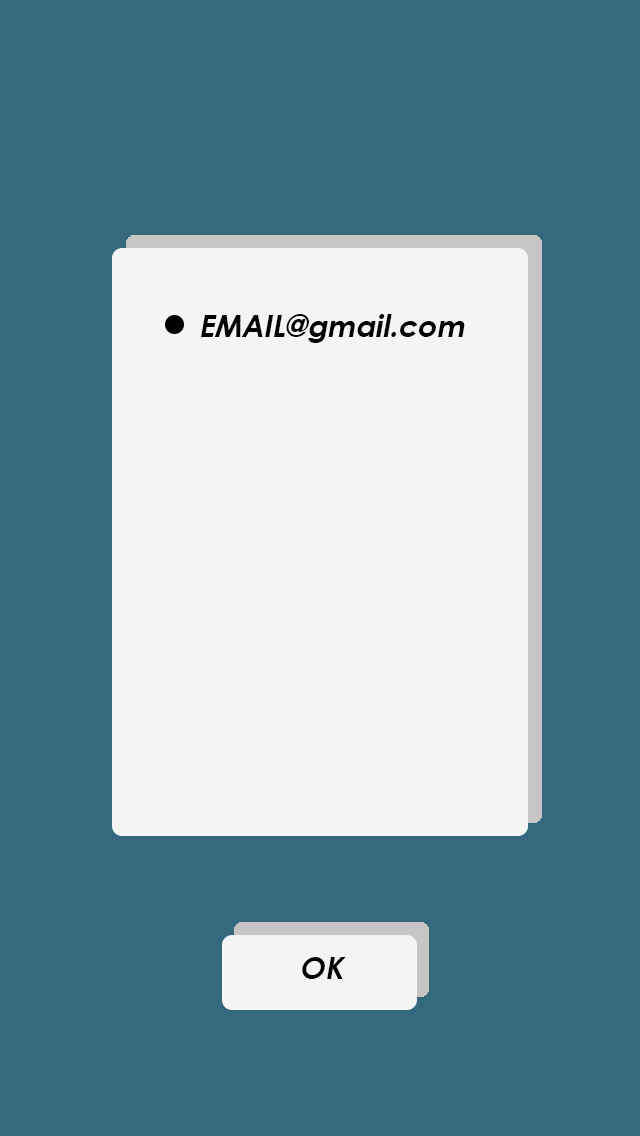
<style>
.page{position:relative;width:640px;height:1136px;background:#356a7e}
.page>*{position:absolute;margin:0}
.t1{font:30px "CenturyGothic-Bold";color:#030303;font-style:italic}
</style>
<div class="page">
<p class="t1" style="left:201px;top:314px;width:264px;height:29px">EMAIL@gmail.com</p>
<p class="t1" style="left:302px;top:957px;width:44px;height:22px">OK</p>
</div>
